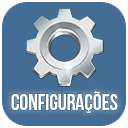
<style>
.page{position:relative;width:128px;height:128px;background:#446d95}
.page>*{position:absolute;margin:0}
.t1{font:22px "BebasNeue";color:#ffffff}
</style>
<div class="page">
<p class="t1" style="left:11px;top:91px;width:107px;height:22px">configurações</p>
</div>
